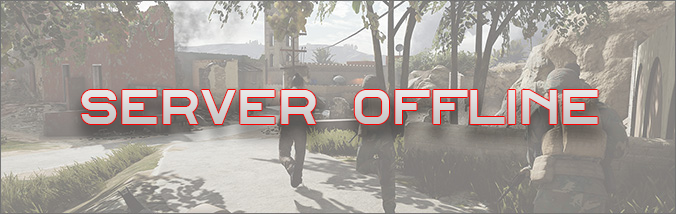
<style>
.page{position:relative;width:676px;height:214px}
.page>*{position:absolute;margin:0}
.t1{font:48px "Alfphabet-IV";color:#d9d9d9}
</style>
<div class="page">
<p class="t1" style="left:81px;top:90px;width:517px;height:34px">Server offline</p>
</div>
